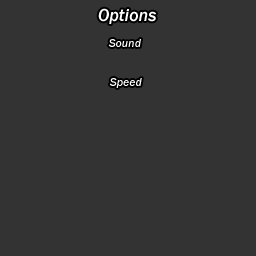
<style>
.page{position:relative;width:256px;height:256px;background:#333333}
.page>*{position:absolute;margin:0}
.t1{font:18px "FranklinGothic-MediumItalic";color:#ffffff}
.t2{font:12px "FranklinGothic-MediumItalic";color:#ffffff}
</style>
<div class="page">
<p class="t1" style="left:98px;top:8px;width:59px;height:16px">Options</p>
<p class="t2" style="left:108px;top:39px;width:33px;height:8px">Sound</p>
<p class="t2" style="left:109px;top:78px;width:33px;height:10px">Speed</p>
</div>
